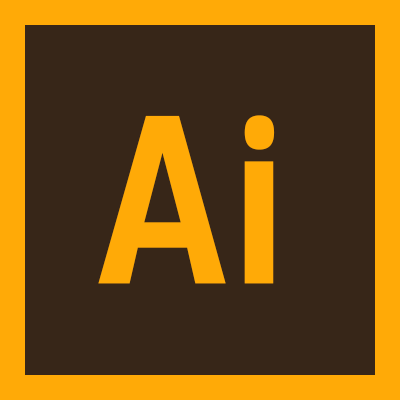
<style>
.page{position:relative;width:400px;height:400px;background:#372618}
.page>*{position:absolute;margin:0}
.t1{font:208.3px "HGPSoeiKakugothicUB";color:#ffaa07;scale:1.12 1}
</style>
<div class="page">
<p class="t1" style="left:98px;top:115px;width:177px;height:169px">Ai</p>
</div>
